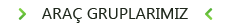
<style>
.page{position:relative;width:240px;height:28px;background:#ffffff}
.page>*{position:absolute;margin:0}
.t1{font:16.2px "Ebrima";color:#1f281c}
</style>
<div class="page">
<p class="t1" style="left:42px;top:8px;width:146px;height:15px">ARAÇ GRUPLARIMIZ</p>
</div>
